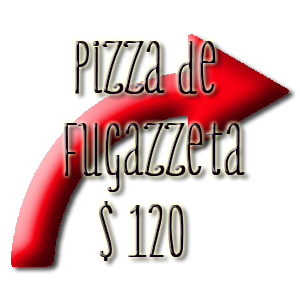
<style>
.page{position:relative;width:300px;height:300px;background:#ffffff}
.page>*{position:absolute;margin:0}
.t1{font:68px "OnlyYouProLight";font-weight:bold}
</style>
<div class="page">
<p class="t1" style="left:64px;top:41px;width:181px;height:220px">Pizza de <br>   Fugazzeta<br>    $ 120</p>
</div>
